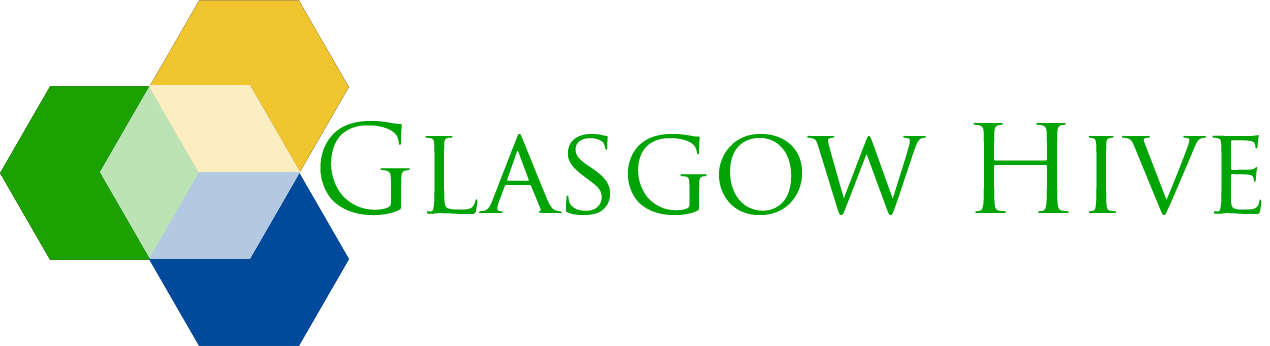
<style>
.page{position:relative;width:1270px;height:346px;background:#ffffff}
.page>*{position:absolute;margin:0}
.t1{font:120px "TrajanPro-Regular";color:#00a304}
</style>
<div class="page">
<p class="t1" style="left:320px;top:121px;width:942px;height:95px">Glasgow Hive</p>
</div>
